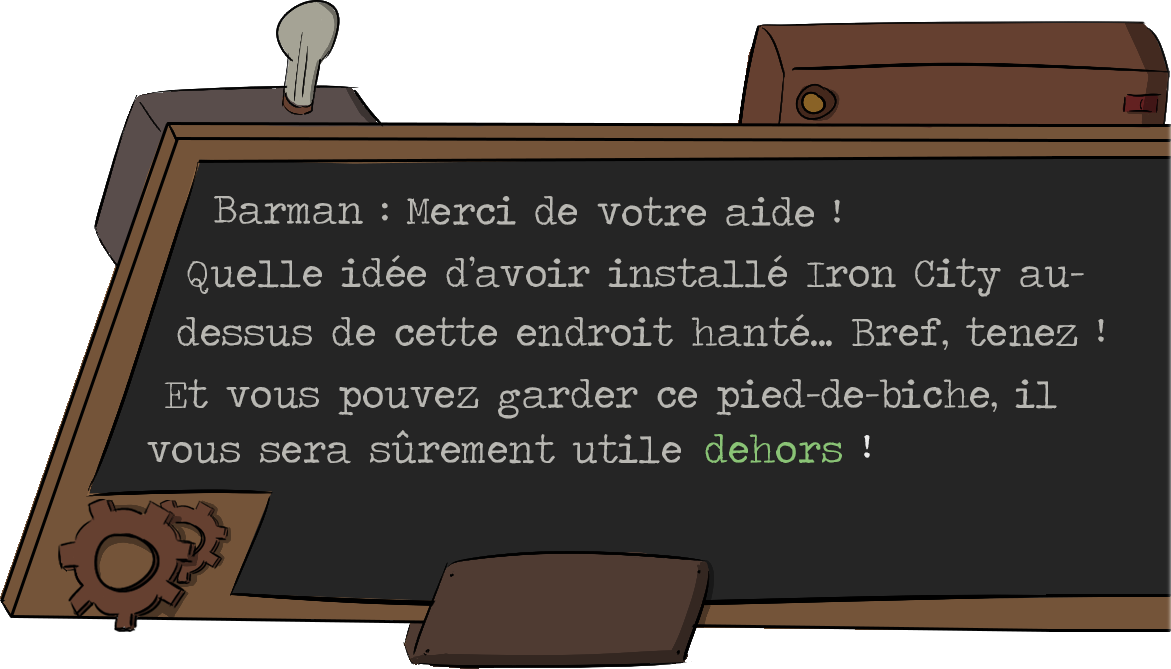
<style>
.page{position:relative;width:1171px;height:669px;background:#252525}
.page>*{position:absolute;margin:0}
.t1{font:40px "TravelingTypewriter";color:#b8b7b2}
.t2{font:40px "TravelingTypewriter";color:#8ac376}
.t3{font:40px "TravelingTypewriter";color:#ececec}
</style>
<div class="page">
<p class="t1" style="left:214px;top:196px;width:626px;height:31px">Barman : Merci de votre aide !</p>
<p class="t1" style="left:187px;top:255px;width:897px;height:42px">Quelle idée d’avoir installé Iron City au-</p>
<p class="t1" style="left:177px;top:314px;width:927px;height:36px">dessus de cette endroit hanté... Bref, tenez !</p>
<p class="t1" style="left:164px;top:379px;width:893px;height:40px">Et vous pouvez garder ce pied-de-biche, il</p>
<p class="t1" style="left:147px;top:430px;width:534px;height:34px">vous sera sûrement utile</p>
<p class="t2" style="left:705px;top:434px;width:137px;height:29px">dehors</p>
<p class="t3" style="left:864px;top:435px;width:6px;height:23px">!</p>
</div>
